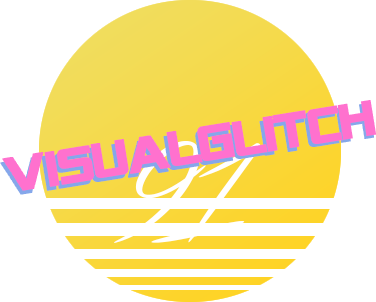
<style>
.page{position:relative;width:376px;height:302px;background:#ffffff}
.page>*{position:absolute;margin:0}
.t1{font:48.7px "SFAlienEncounters";letter-spacing:-0.04em;color:#ff71ce;font-weight:bold;scale:1.09 1}
.t2{font:48.7px "SFAlienEncounters";letter-spacing:-0.04em;font-weight:bold;scale:1.09 1}
.t3{font:104.6px "Streamster";letter-spacing:-0.04em;color:#ffffff}
</style>
<div class="page">
<p class="t1" style="left:2px;top:100px;width:374px;height:91px;rotate:-9deg">VISUALGLITCH</p>
<p class="t2" style="left:0px;top:103px;width:374px;height:92px;rotate:-9deg">VISUALGLITCH</p>
<p class="t3" style="left:114px;top:141px;width:147px;height:102px">91</p>
</div>
